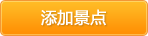
<style>
.page{position:relative;width:148px;height:36px}
.page>*{position:absolute;margin:0}
.t1{font:16px "MicrosoftYaHei";color:#ffffff;font-weight:bold}
</style>
<div class="page">
<p class="t1" style="left:41px;top:9px;width:65px;height:17px">添加景点</p>
</div>
